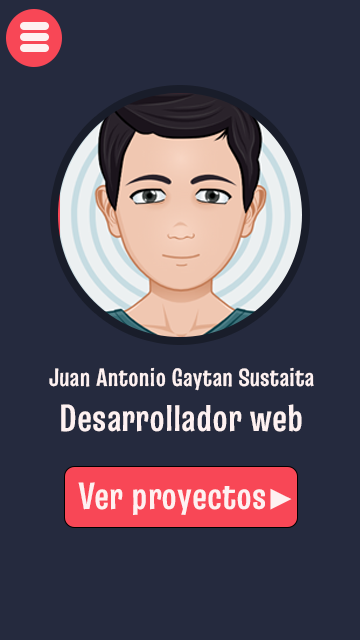
<style>
.page{position:relative;width:360px;height:640px;background:#252a3e}
.page>*{position:absolute;margin:0}
.t1{font:25px "TruculentaRoman-Bold";color:#fef1f1}
.t2{font:37.5px "TruculentaRoman-Bold";color:#fef1f1}
.t3{font:29.2px "ArialMT";color:#fef1f1}
</style>
<div class="page">
<p class="t1" style="left:49px;top:367px;width:265px;height:65px;text-align:center">Juan Antonio Gaytan Sustaita<br><span class="t2">Desarrollador web</span></p>
<p class="t2" style="left:78px;top:482px;width:214px;height:33px">Ver proyectos<span class="t3">►</span></p>
</div>
